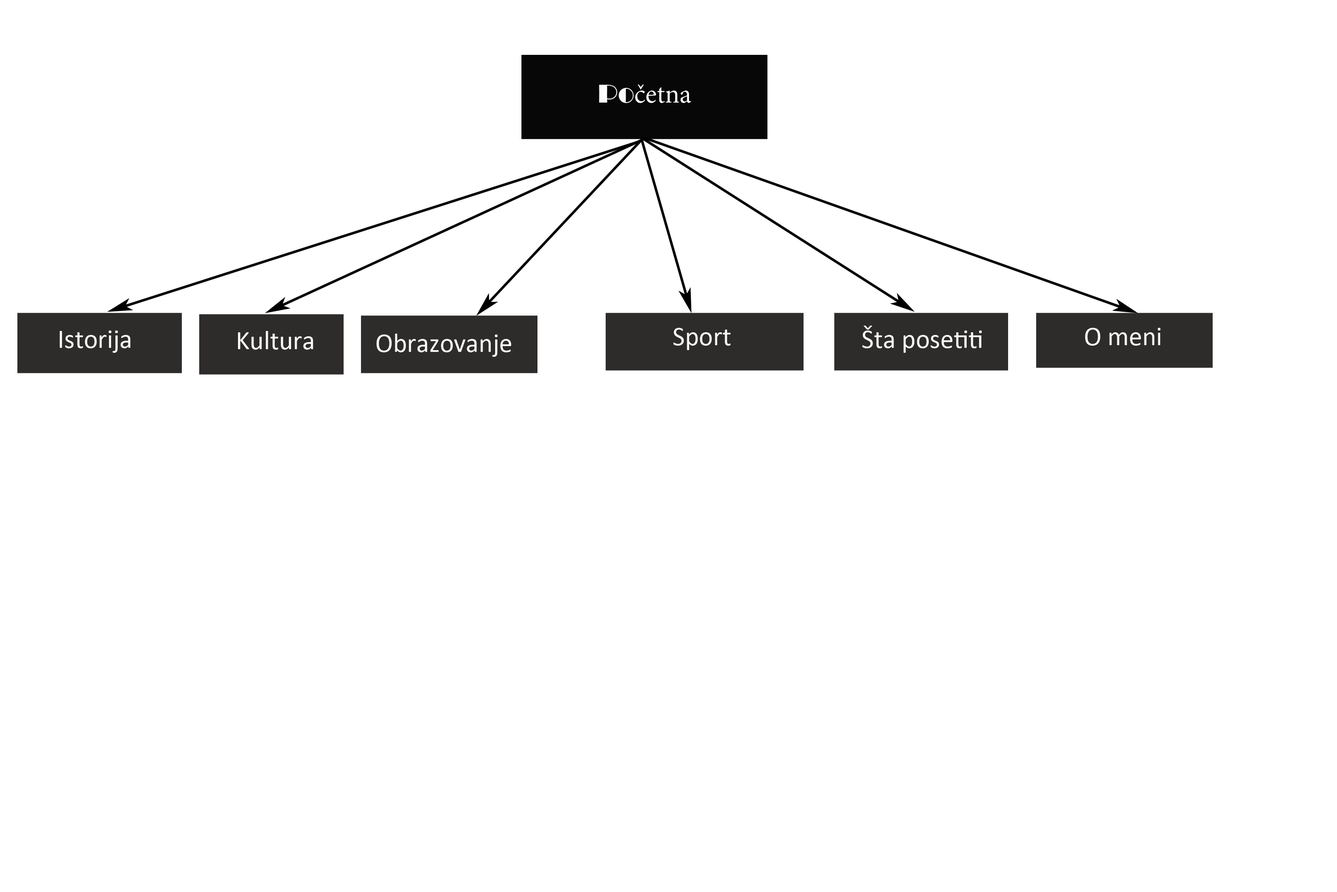
<style>
.page{position:relative;width:1337px;height:892px;background:#ffffff}
.page>*{position:absolute;margin:0}
.t1{font:26.7px "MinionPro-Regular";color:#fefbfb}
.t2{font:21.4px "NirmalaUI-Bold";color:#fefbfb}
.t3{font:26.7px "Broadway";color:#fefbfb}
.t4{font:26.7px "Calibri";color:#fbf8f8}
</style>
<div class="page">
<p class="t1" style="left:599px;top:84px;width:92px;height:19px"><span class="t2"><br></span><span class="t3">Po</span>četna</p>
<p class="t4" style="left:674px;top:328px;width:57px;height:22px">Sport</p>
<p class="t4" style="left:863px;top:325px;width:119px;height:28px">Šta posetiti</p>
<p class="t4" style="left:1085px;top:328px;width:76px;height:17px">O meni</p>
<p class="t4" style="left:60px;top:330px;width:71px;height:23px">Istorija</p>
<p class="t4" style="left:238px;top:331px;width:75px;height:19px">Kultura</p>
<p class="t4" style="left:376px;top:333px;width:135px;height:24px">Obrazovanje</p>
</div>
